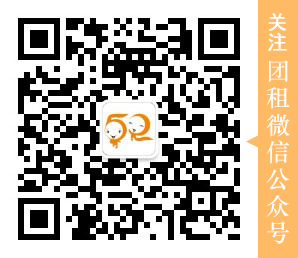
<style>
.page{position:relative;width:298px;height:258px;background:#ffffff}
.page>*{position:absolute;margin:0}
.t1{font:20px "SimHei";color:#ffffff;font-weight:bold}
.t2{font:24px "STZhongsong";color:#ffffff}
</style>
<div class="page">
<p class="t1" style="left:268px;top:13px;width:19px;height:39px">关<br>注</p>
<p class="t2" style="left:266px;top:60px;width:24px;height:184px"><span class="t1"><br></span>团<br>租<br>微<br>信<br>公<br>众<br>号</p>
</div>
